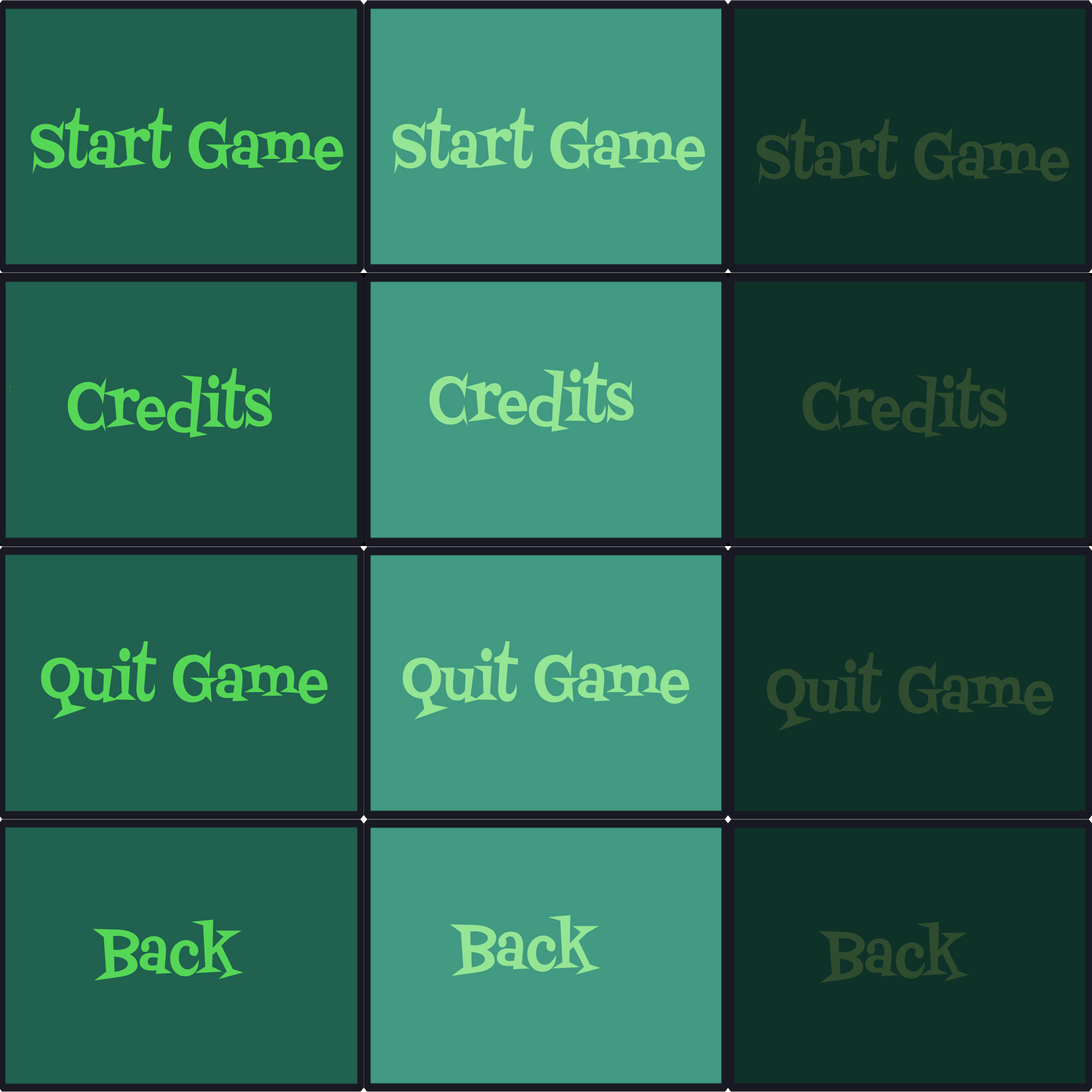
<style>
.page{position:relative;width:1092px;height:1092px;background:#0e3228}
.page>*{position:absolute;margin:0}
.t1{font:65.3px "FontdinerSwanky-Regular";color:#56d656;scale:0.8 1}
.t2{font:65.3px "FontdinerSwanky-Regular";color:#95e595;scale:0.8 1}
.t3{font:65.3px "FontdinerSwanky-Regular";color:#2f4c2f;scale:0.8 1}
.t4{font:65.4px "FontdinerSwanky-Regular";color:#95e595;scale:0.8 1}
.t5{font:65.4px "FontdinerSwanky-Regular";color:#56d656;scale:0.8 1}
.t6{font:65.4px "FontdinerSwanky-Regular";color:#2f4c2f;scale:0.8 1}
</style>
<div class="page">
<p class="t1" style="left:30px;top:108px;width:314px;height:66px">Start Game</p>
<p class="t2" style="left:392px;top:108px;width:313px;height:66px">Start Game</p>
<p class="t3" style="left:756px;top:119px;width:313px;height:66px">Start Game</p>
<p class="t4" style="left:430px;top:362px;width:204px;height:70px">Credits</p>
<p class="t5" style="left:68px;top:368px;width:204px;height:70px">Credits</p>
<p class="t6" style="left:803px;top:368px;width:204px;height:70px">Credits</p>
<p class="t1" style="left:41px;top:641px;width:287px;height:79px">Quit Game</p>
<p class="t2" style="left:403px;top:641px;width:286px;height:79px">Quit Game</p>
<p class="t3" style="left:767px;top:652px;width:286px;height:79px">Quit Game</p>
<p class="t2" style="left:450px;top:915px;width:151px;height:61px">Back</p>
<p class="t1" style="left:93px;top:920px;width:150px;height:61px">Back</p>
<p class="t3" style="left:819px;top:922px;width:150px;height:61px">Back</p>
</div>
